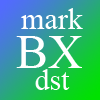
<style>
.page{position:relative;width:100px;height:100px}
.page>*{position:absolute;margin:0}
.t1{font:30px "TimesNewRomanPSMT";color:#ffffff}
.t2{font:48px "TimesNewRomanPSMT";color:#ffffff}
</style>
<div class="page">
<p class="t1" style="left:21px;top:8px;width:62px;height:21px">mark</p>
<p class="t2" style="left:16px;top:36px;width:66px;height:32px">BX</p>
<p class="t1" style="left:35px;top:69px;width:35px;height:21px">dst</p>
</div>
